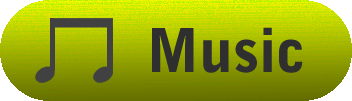
<style>
.page{position:relative;width:352px;height:101px}
.page>*{position:absolute;margin:0}
.t1{font:60px "BellGothicStd-Black";color:#302f2f}
</style>
<div class="page">
<p class="t1" style="left:152px;top:27px;width:151px;height:46px">Music</p>
</div>
